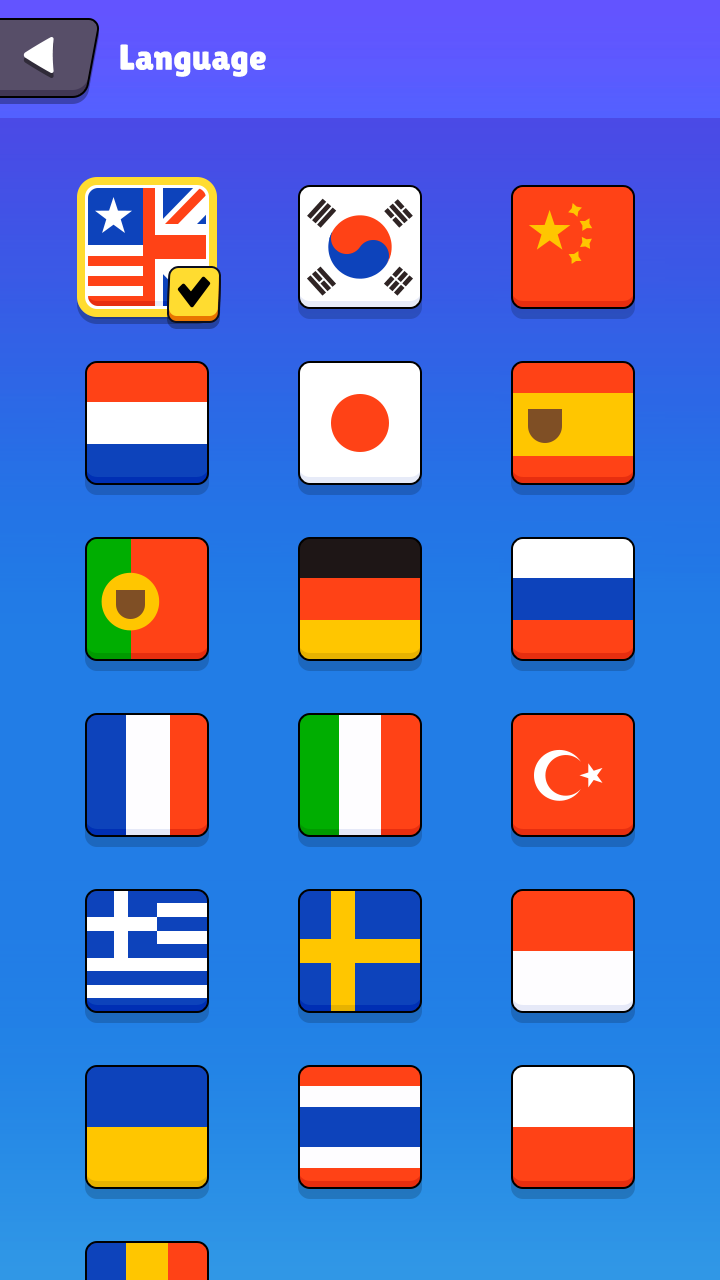
<style>
.page{position:relative;width:720px;height:1280px}
.page>*{position:absolute;margin:0}
.t1{font:36px "LilitaOne";color:#ffffff}
</style>
<div class="page">
<p class="t1" style="left:120px;top:44px;width:146px;height:33px">Language</p>
</div>
